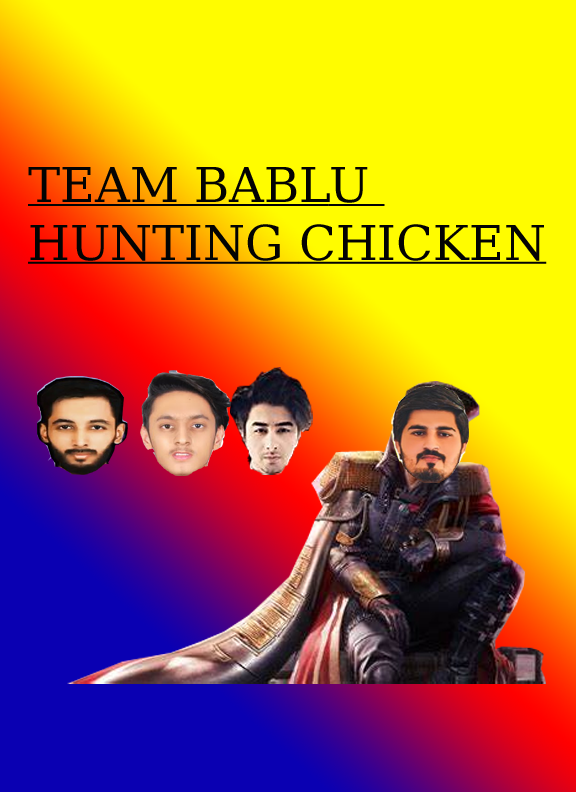
<style>
.page{position:relative;width:576px;height:792px;background:#fffc00}
.page>*{position:absolute;margin:0}
.t1{font:48px "DejaVuSerif";color:#030303;text-transform:uppercase;text-decoration:underline}
</style>
<div class="page">
<p class="t1" style="left:28px;top:167px;width:519px;height:97px">TEAM BABLU <br>HUNTING CHICKEN</p>
</div>
